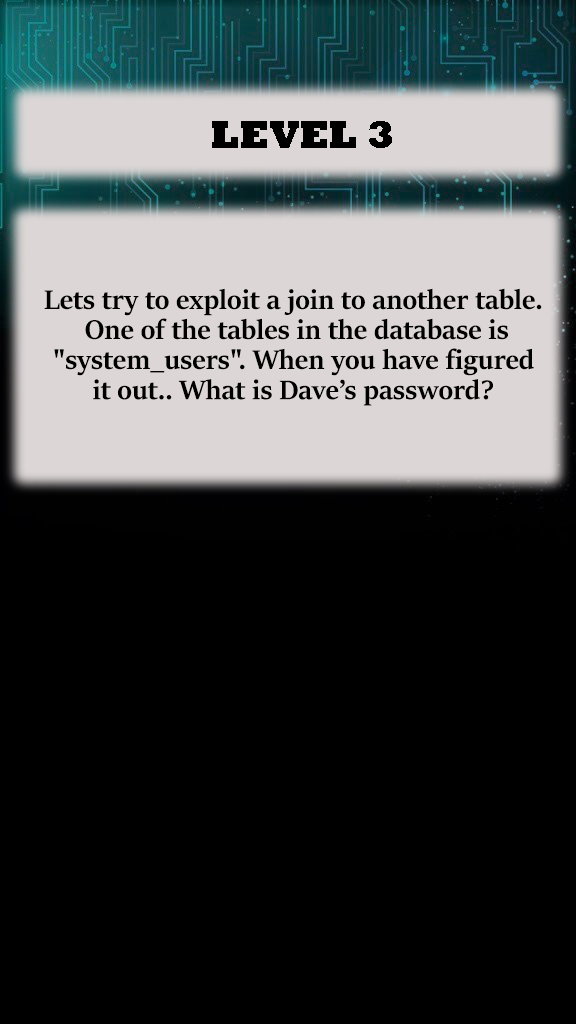
<style>
.page{position:relative;width:576px;height:1024px;background:#000000}
.page>*{position:absolute;margin:0}
.t1{font:40px "Rockwell-ExtraBold";color:#000000}
.t2{font:30px/10px "SitkaBanner-Bold";color:#000000}
</style>
<div class="page">
<p class="t1" style="left:212px;top:121px;width:180px;height:27px">LEVEL 3</p>
<p class="t2" style="left:44px;top:288px;width:498px;height:118px;text-align:center">Lets try to exploit a join to another table.<br><br><br> One of the tables in the database is <br><br><br>"system_users". When you have figured <br><br><br>it out.. What is Dave’s password?</p>
</div>
